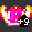
<style>
.page{position:relative;width:32px;height:32px;background:#333333}
.page>*{position:absolute;margin:0}
.t1{font:10px "Ebrima";color:#ffffff}
</style>
<div class="page">
<p class="t1" style="left:18px;top:18px;width:11px;height:7px">+9</p>
</div>
